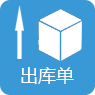
<style>
.page{position:relative;width:95px;height:95px;background:#3998d6}
.page>*{position:absolute;margin:0}
.t1{font:18px "MicrosoftYaHei";color:#ffffff}
</style>
<div class="page">
<p class="t1" style="left:21px;top:67px;width:53px;height:17px">出库单</p>
</div>
